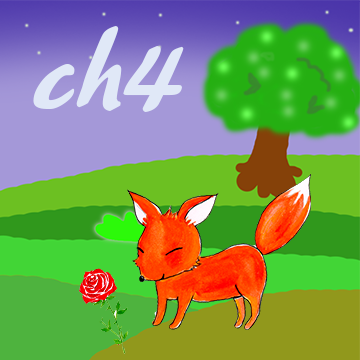
<style>
.page{position:relative;width:360px;height:360px}
.page>*{position:absolute;margin:0}
.t1{font:117.6px "ARBERKLEY";color:#e0e8f7}
</style>
<div class="page">
<p class="t1" style="left:33px;top:26px;width:151px;height:86px">ch4</p>
</div>
